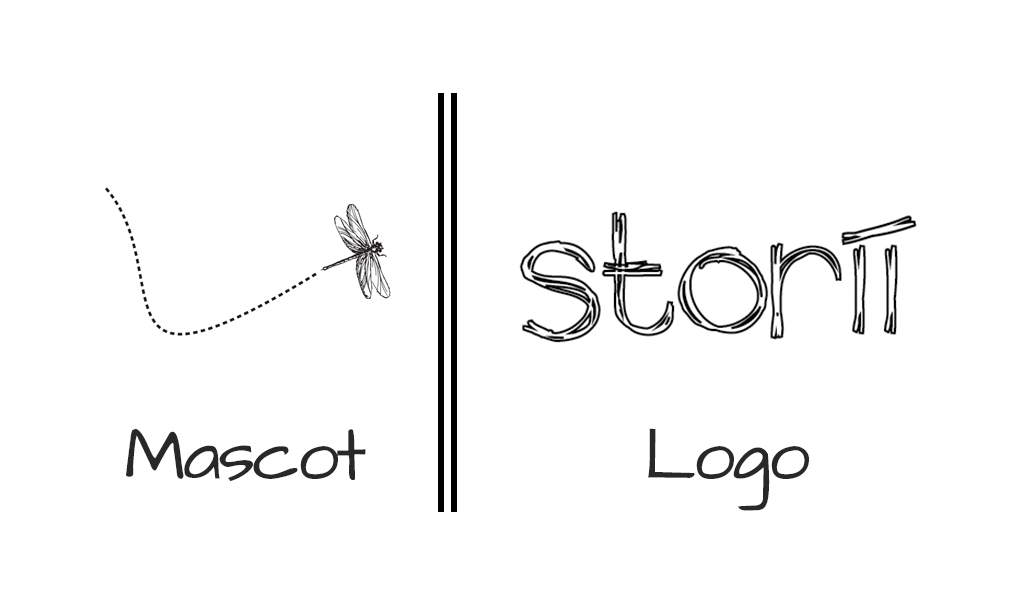
<style>
.page{position:relative;width:1023px;height:600px;background:#ffffff}
.page>*{position:absolute;margin:0}
.t1{font:60px "ArchitectsDaughter";letter-spacing:-0.05em;color:#282828}
</style>
<div class="page">
<p class="t1" style="left:126px;top:429px;width:240px;height:52px">Mascot</p>
<p class="t1" style="left:648px;top:428px;width:161px;height:83px">Logo</p>
</div>
